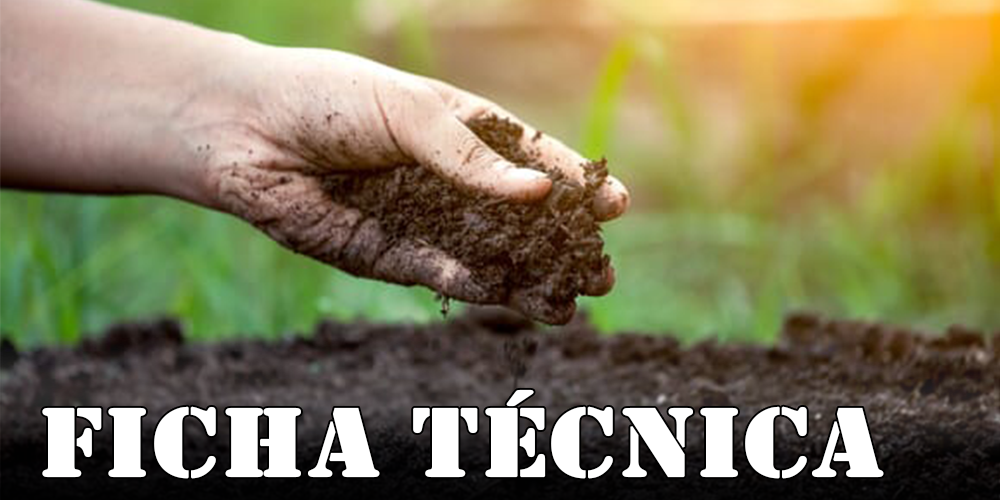
<style>
.page{position:relative;width:1000px;height:500px}
.page>*{position:absolute;margin:0}
.t1{font:100px "Stencil";color:#ffffff;font-weight:bold;scale:1.12 1}
</style>
<div class="page">
<p class="t1" style="left:42px;top:389px;width:842px;height:90px">FICHA TÉCNICA</p>
</div>
